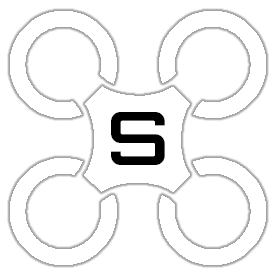
<style>
.page{position:relative;width:276px;height:276px;background:#ffffff}
.page>*{position:absolute;margin:0}
.t1{font:72px "Orbitron-Medium";color:#000000;font-weight:bold}
</style>
<div class="page">
<p class="t1" style="left:111px;top:112px;width:54px;height:53px">S</p>
</div>
